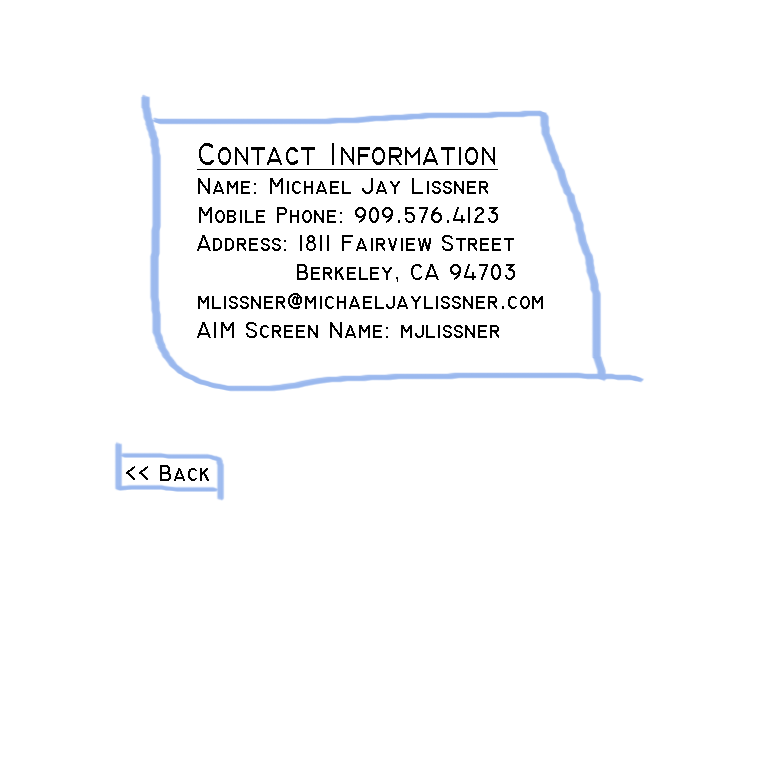
<style>
.page{position:relative;width:768px;height:768px;background:#ffffff}
.page>*{position:absolute;margin:0}
.t1{font:24px "TechnicBold";color:#000000}
.t2{font:32px "TechnicBold";color:#000000;text-decoration:underline}
</style>
<div class="page">
<p class="t1" style="left:197px;top:143px;width:346px;height:195px"><span class="t2">Contact Information<br></span>Name: Michael Jay Lissner<br>Mobile Phone: 909.576.4123<br>Address: 1811 Fairview Street<br>           Berkeley, CA 94703<br>mlissner@michaeljaylissner.com<br>AIM Screen Name: mjlissner</p>
<p class="t1" style="left:126px;top:465px;width:83px;height:16px">&lt;&lt; Back</p>
</div>
